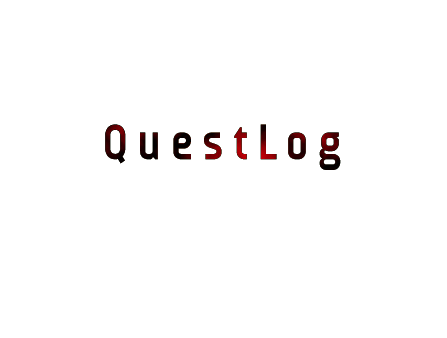
<style>
.page{position:relative;width:447px;height:338px;background:#ffffff}
.page>*{position:absolute;margin:0}
.t1{font:50.9px "AUdimat-Bold";letter-spacing:0.195em;scale:0.94 1}
</style>
<div class="page">
<p class="t1" style="left:105px;top:124px;width:236px;height:46px">QuestLog</p>
</div>
